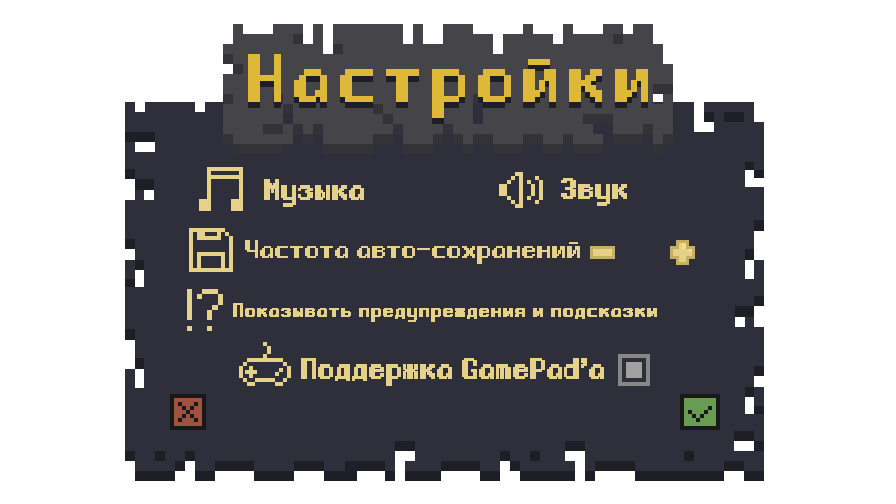
<style>
.page{position:relative;width:896px;height:504px;background:#2f2f3b}
.page>*{position:absolute;margin:0}
.t1{font:18px "Gnomoria_rus";color:#e6d188;font-weight:bold}
.t2{font:16px "Gnomoria_rus";color:#e6d188;font-weight:bold}
.t3{font:12px "Gnomoria_rus";color:#e6d188;font-weight:bold}
</style>
<div class="page">
<p class="t1" style="left:264px;top:179px;width:100px;height:28px">Музыка</p>
<p class="t1" style="left:561px;top:178px;width:66px;height:28px">Звук</p>
<p class="t2" style="left:245px;top:240px;width:335px;height:24px">Частота авто-сохранений</p>
<p class="t3" style="left:233px;top:303px;width:424px;height:19px">Показывать предупреждения и подсказки</p>
<p class="t1" style="left:301px;top:358px;width:303px;height:28px">Поддержка GamePad’a</p>
</div>
